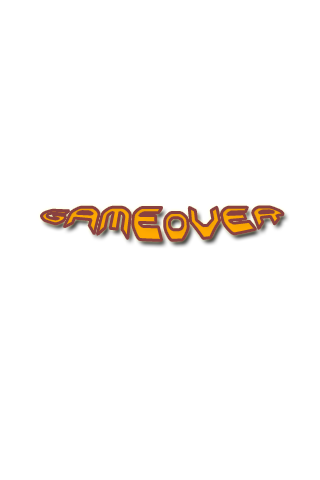
<style>
.page{position:relative;width:320px;height:480px;background:#ffffff}
.page>*{position:absolute;margin:0}
.t1{font:24px "Omni-Girl";scale:1.09 1}
</style>
<div class="page">
<p class="t1" style="left:41px;top:207px;width:242px;height:34px">gAMEoVER</p>
</div>
